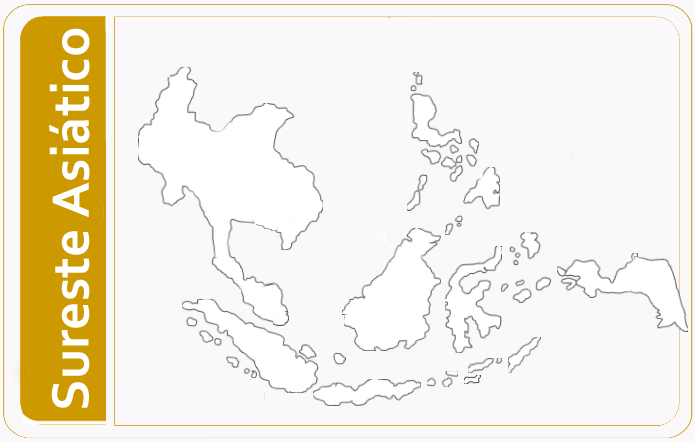
<style>
.page{position:relative;width:695px;height:441px;background:#fbf8fb}
.page>*{position:absolute;margin:0}
.t1{font:55px "Corbel-Bold";color:#ffffff}
</style>
<div class="page">
<p class="t1" style="left:49px;top:28px;width:41px;height:380px;rotate:-90deg">Sureste Asiático</p>
</div>
